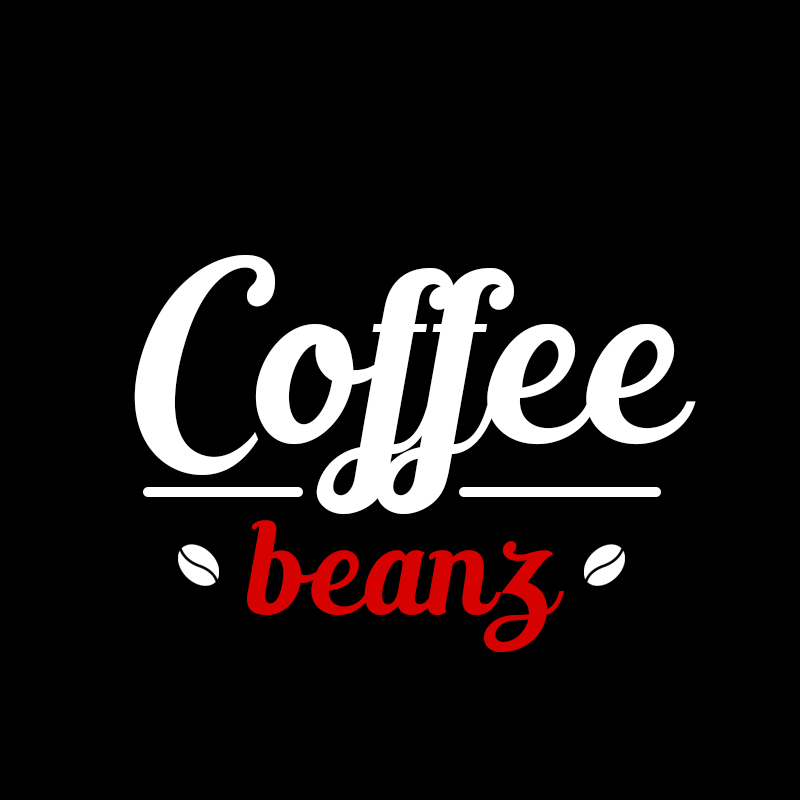
<style>
.page{position:relative;width:800px;height:800px;background:#000000}
.page>*{position:absolute;margin:0}
.t1{font:251.9px "Altoysjustpersonalonly-Italic";color:#ffffff}
.t2{font:135.7px "Altoysjustpersonalonly-Italic";color:#d60202}
</style>
<div class="page">
<p class="t1" style="left:134px;top:255px;width:562px;height:259px">Coffee</p>
<p class="t2" style="left:247px;top:520px;width:318px;height:132px">beanz</p>
</div>
